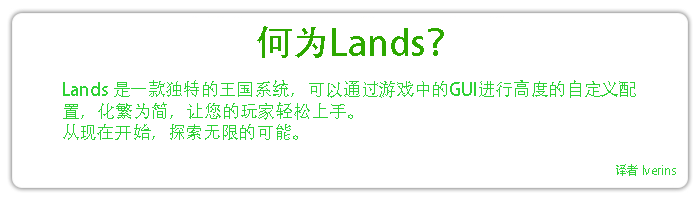
<style>
.page{position:relative;width:700px;height:200px;background:#ffffff}
.page>*{position:absolute;margin:0}
.t1{font:36px "AdobeHeitiStd-Regular";color:#2da800}
.t2{font:18px "AdobeHeitiStd-Regular";color:#2dd134}
.t3{font:12px "AdobeHeitiStd-Regular";color:#2dd134}
</style>
<div class="page">
<p class="t1" style="left:257px;top:26px;width:187px;height:32px">何为Lands？</p>
<p class="t2" style="left:63px;top:80px;width:573px;height:60px">Lands 是一款独特的王国系统，可以通过游戏中的GUI进行高度的自定义配<br>置，化繁为简，让您的玩家轻松上手。<br>从现在开始，探索无限的可能。</p>
<p class="t3" style="left:616px;top:164px;width:60px;height:12px">译者 Iverins</p>
</div>
